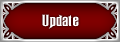
<style>
.page{position:relative;width:120px;height:42px}
.page>*{position:absolute;margin:0}
.t1{font:16px "Ravenscroft";color:#ffffff;scale:1.8 1}
</style>
<div class="page">
<p class="t1" style="left:42px;top:14px;width:37px;height:15px">Update</p>
</div>
